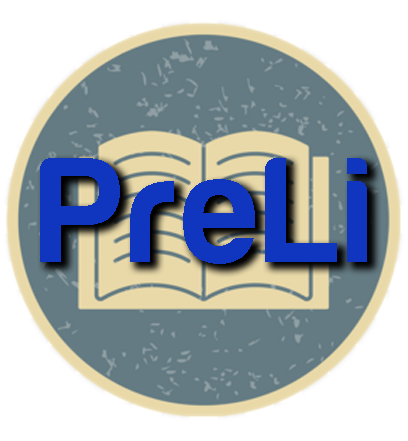
<style>
.page{position:relative;width:408px;height:441px;background:#ffffff}
.page>*{position:absolute;margin:0}
.t1{font:153px "HarabaraMaisBold-HarabaraMaisBold";color:#1035bf}
</style>
<div class="page">
<p class="t1" style="left:40px;top:158px;width:327px;height:106px">PreLi</p>
</div>
